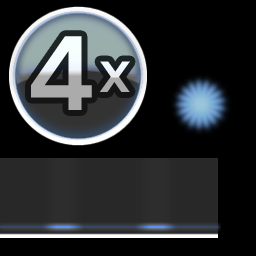
<style>
.page{position:relative;width:256px;height:256px;background:#000000}
.page>*{position:absolute;margin:0}
.t1{font:120px "Pentatonic"}
.t2{font:65px "Pentatonic"}
</style>
<div class="page">
<p class="t1" style="left:31px;top:36px;width:61px;height:74px">4</p>
<p class="t2" style="left:99px;top:61px;width:31px;height:31px">x</p>
</div>
